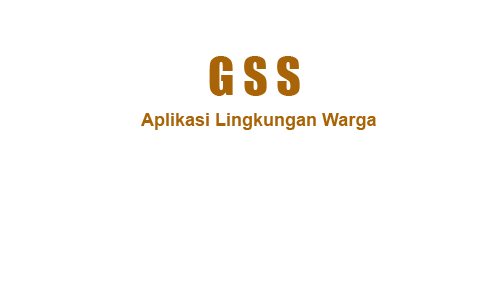
<style>
.page{position:relative;width:500px;height:300px;background:#ffffff}
.page>*{position:absolute;margin:0}
.t1{font:48px "Impact";color:#a86407}
.t2{font:18px "Arial-BoldMT";color:#a86407}
</style>
<div class="page">
<p class="t1" style="left:209px;top:56px;width:91px;height:40px">G S S</p>
<p class="t2" style="left:141px;top:113px;width:235px;height:17px">Aplikasi Lingkungan Warga</p>
</div>
